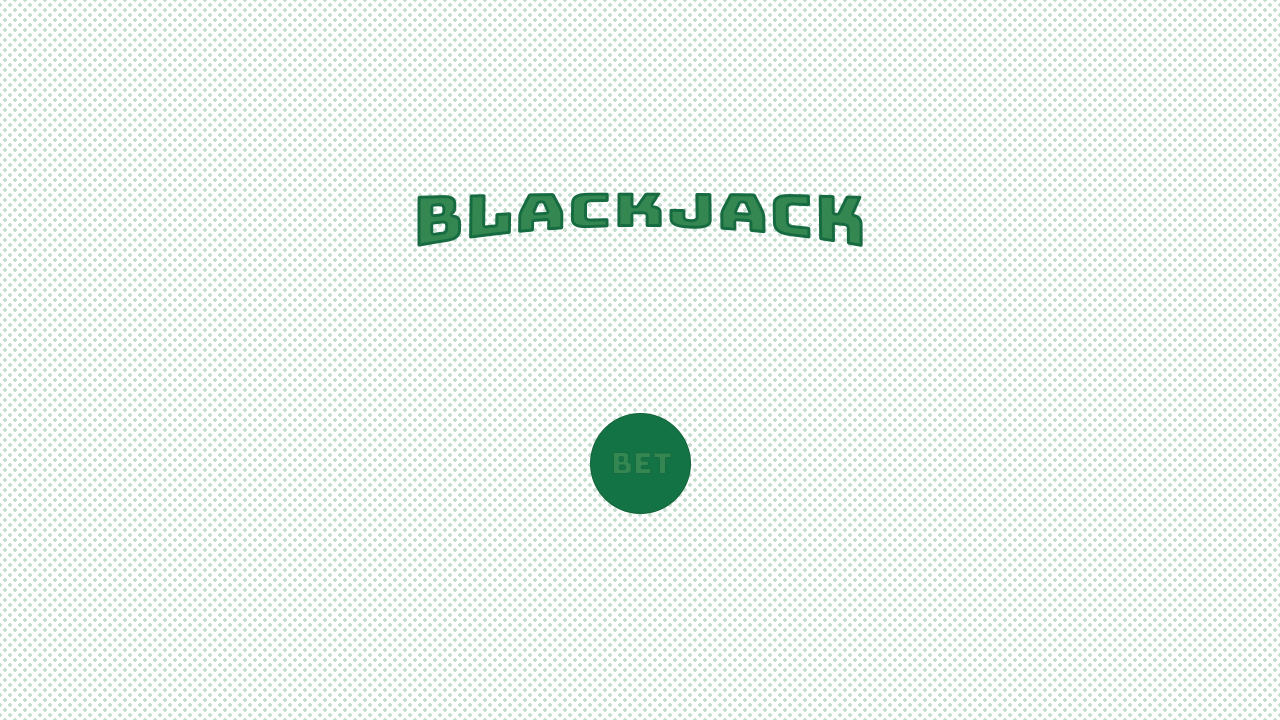
<style>
.page{position:relative;width:1280px;height:720px;background:#c5dece}
.page>*{position:absolute;margin:0}
.t1{font:72px "Bungee-Regular";color:#348751}
.t2{font:30px "Bungee-Regular";color:#348751}
</style>
<div class="page">
<p class="t1" style="left:417px;top:192px;width:446px;height:55px">BLACKJACK</p>
<p class="t2" style="left:613px;top:452px;width:59px;height:22px">BET</p>
</div>
